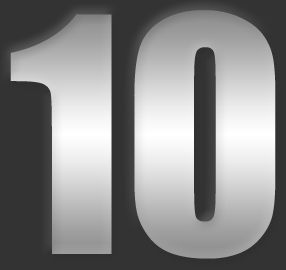
<style>
.page{position:relative;width:286px;height:270px;background:#333333}
.page>*{position:absolute;margin:0}
.t1{font:302.6px "Impact"}
</style>
<div class="page">
<p class="t1" style="left:10px;top:10px;width:266px;height:249px">10</p>
</div>
